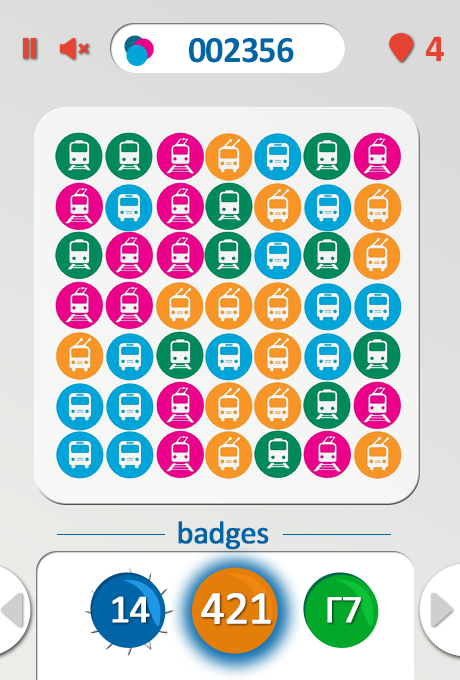
<style>
.page{position:relative;width:460px;height:680px}
.page>*{position:absolute;margin:0}
.t1{font:37.6px "Calibri-Bold";letter-spacing:-0.025em;color:#0065a3}
.t2{font:38.3px "Calibri-Bold";letter-spacing:-0.025em;color:#e74332}
.t3{font:32.1px "Calibri";letter-spacing:-0.025em;color:#0065a7;font-weight:bold}
.t4{font:46.7px "Calibri";letter-spacing:-0.025em;color:#ffffff;font-weight:bold}
.t5{font:39.7px "Calibri";letter-spacing:-0.025em;color:#ffffff;font-weight:bold}
.t6{font:39.7px "Calibri";letter-spacing:-0.025em;font-weight:bold}
</style>
<div class="page">
<p class="t1" style="left:189px;top:38px;width:105px;height:25px">002356</p>
<p class="t2" style="left:425px;top:36px;width:19px;height:25px">4</p>
<p class="t3" style="left:178px;top:521px;width:91px;height:29px">badges</p>
<p class="t4" style="left:201px;top:593px;width:70px;height:31px">421</p>
<p class="t5" style="left:112px;top:596px;width:38px;height:27px">14</p>
<p class="t6" style="left:206px;top:595px;width:60px;height:27px">421</p>
<p class="t5" style="left:327px;top:597px;width:34px;height:26px">Γ7</p>
</div>
